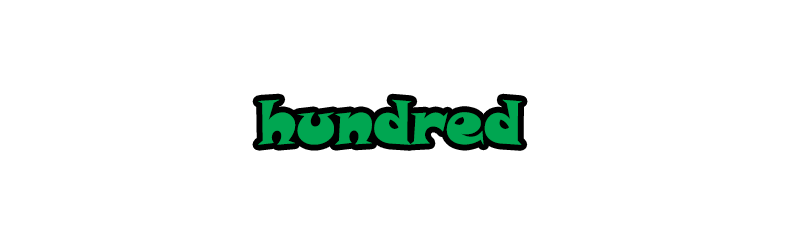
<style>
.page{position:relative;width:812px;height:249px;background:#ffffff}
.page>*{position:absolute;margin:0}
.t1{font:60px "SnapITC-Regular";color:#00a651}
</style>
<div class="page">
<p class="t1" style="left:258px;top:99px;width:264px;height:46px">hundred</p>
</div>
